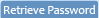
<style>
.page{position:relative;width:99px;height:18px;background:#6392c0}
.page>*{position:absolute;margin:0}
.t1{font:12px "Candara";letter-spacing:-0.01em;color:#ffffff}
</style>
<div class="page">
<p class="t1" style="left:4px;top:5px;width:91px;height:9px">Retrieve Password</p>
</div>
